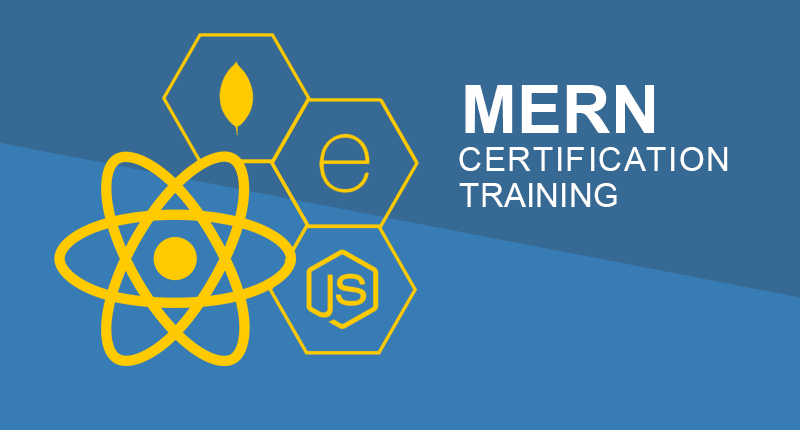
<style>
.page{position:relative;width:800px;height:430px;background:#366994}
.page>*{position:absolute;margin:0}
.t1{font:66.7px "Arial-BoldMT";letter-spacing:0.01em;color:#ffffff}
.t2{font:33.3px "ArialMT";letter-spacing:0.05em;color:#ffffff}
.t3{font:33.3px "ArialMT";color:#ffffff}
</style>
<div class="page">
<p class="t1" style="left:465px;top:85px;width:189px;height:48px">MERN</p>
<p class="t2" style="left:459px;top:147px;width:269px;height:24px">CERTIFICATION</p>
<p class="t3" style="left:459px;top:183px;width:158px;height:24px">TRAINING</p>
</div>
